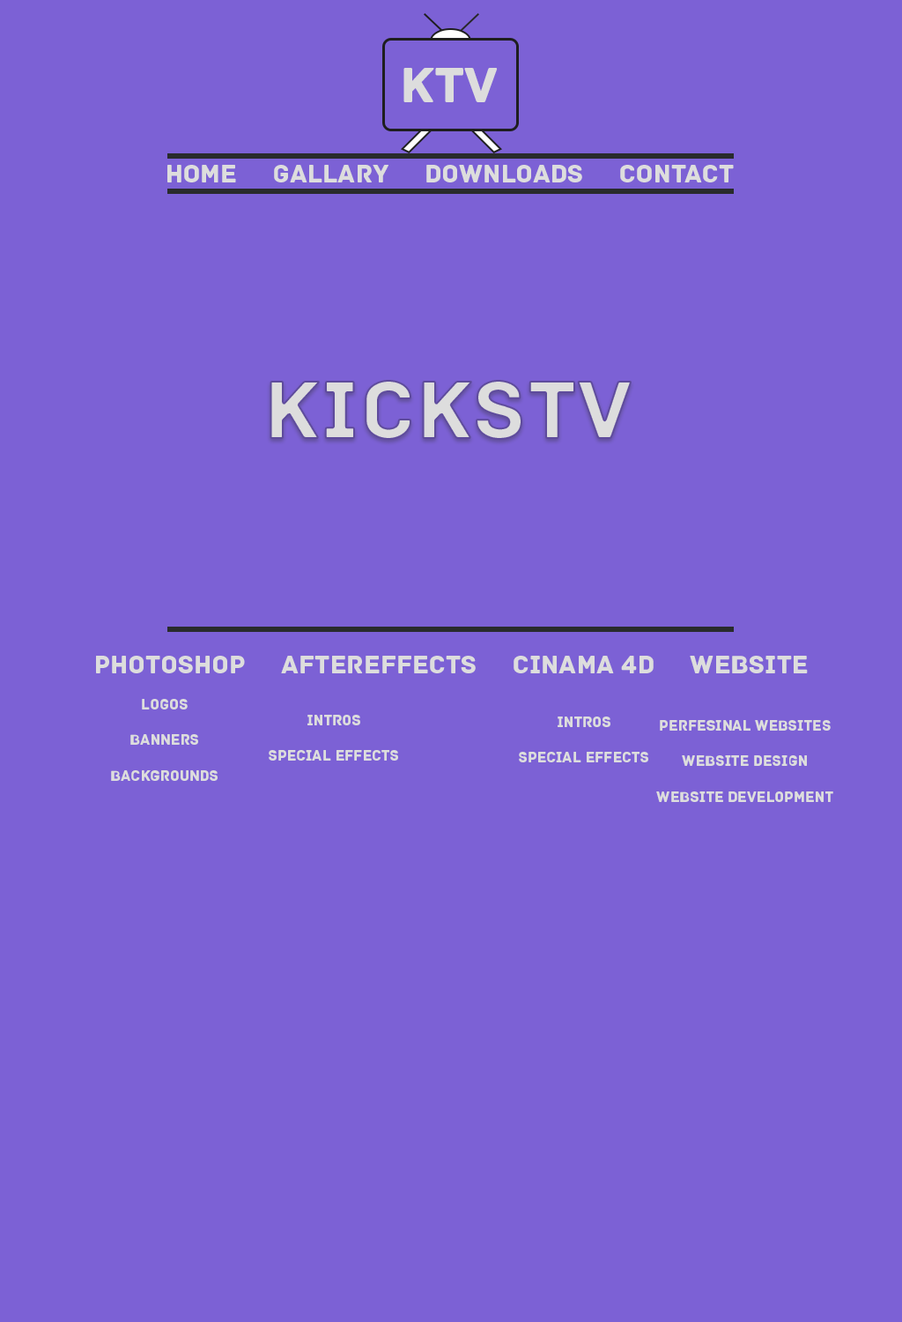
<style>
.page{position:relative;width:902px;height:1322px;background:#7c61d5}
.page>*{position:absolute;margin:0}
.t1{font:52.9px "Archive";color:#dddddd}
.t2{font:26.4px "Archive";color:#dddddd}
.t3{font:88.1px "Archive";color:#dddddd}
.t4{font:15px "Archive";color:#dddddd}
</style>
<div class="page">
<p class="t1" style="left:404px;top:68px;width:94px;height:34px">KTV</p>
<p class="t2" style="left:167px;top:165px;width:567px;height:17px">Home     Gallary     Downloads     Contact</p>
<p class="t3" style="left:270px;top:380px;width:362px;height:60px">KicksTV</p>
<p class="t2" style="left:96px;top:656px;width:712px;height:17px">Photoshop     Aftereffects     Cinama 4d     Website</p>
<p class="t4" style="left:111px;top:699px;width:107px;height:82px;text-align:center">Logos<br><br>Banners<br><br>Backgrounds</p>
<p class="t4" style="left:269px;top:715px;width:129px;height:45px;text-align:center">Intros<br><br>Special effects</p>
<p class="t4" style="left:519px;top:716px;width:129px;height:46px;text-align:center">Intros<br><br>Special effects</p>
<p class="t4" style="left:656px;top:720px;width:178px;height:82px;text-align:center">Perfesinal websites<br><br>Website design<br><br>Website development</p>
</div>
